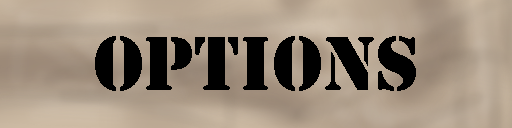
<style>
.page{position:relative;width:512px;height:128px}
.page>*{position:absolute;margin:0}
.t1{font:79.3px "Stencil";color:#000000}
</style>
<div class="page">
<p class="t1" style="left:95px;top:36px;width:321px;height:55px">Options</p>
</div>
